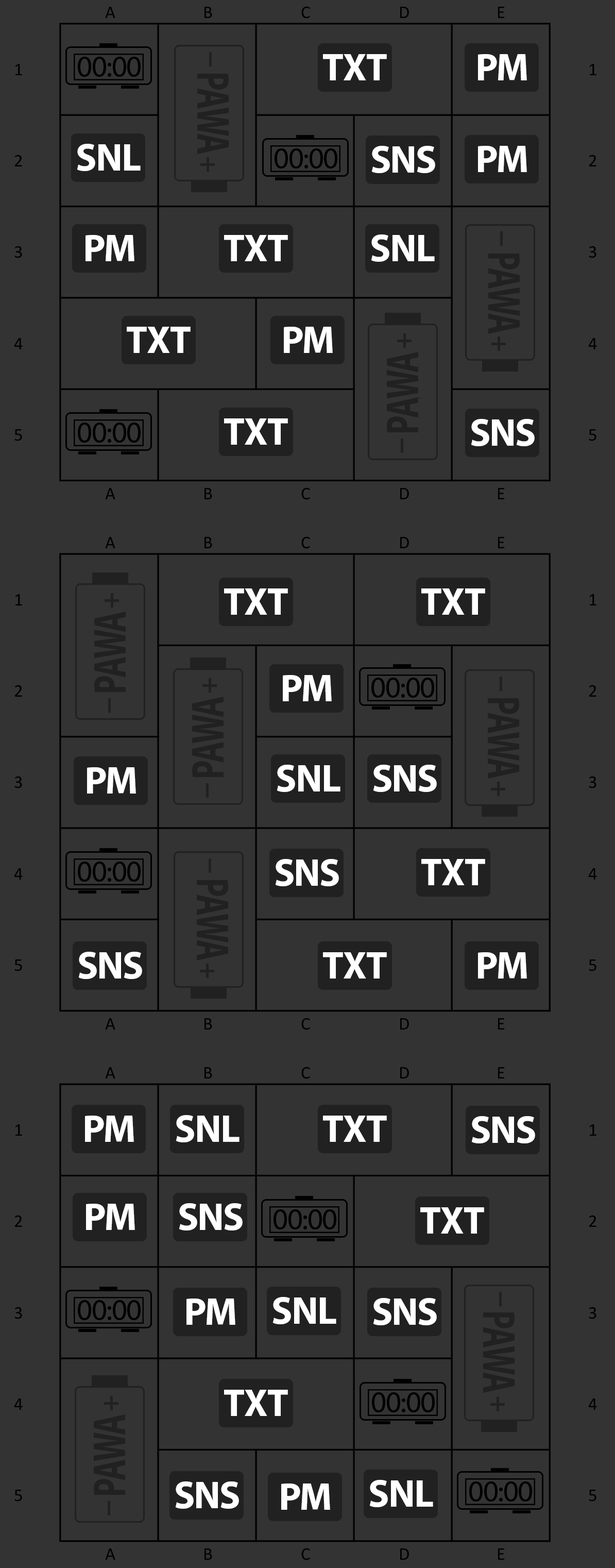
<style>
.page{position:relative;width:615px;height:1568px;background:#333333}
.page>*{position:absolute;margin:0}
.t1{font:30px "MyriadPro-Regular";letter-spacing:-0.025em;color:#000000}
.t2{font:38.6px "MyriadPro-Bold";letter-spacing:-0.025em;color:#ffffff}
.t3{font:46.5px "MyriadPro-Bold";letter-spacing:-0.025em;color:#212121;scale:0.71 1}
.t4{font:46.3px "MyriadPro-Bold";letter-spacing:-0.025em;color:#212121;scale:0.71 1}
</style>
<div class="page">
<p class="t1" style="left:78px;top:57px;width:63px;height:20px">00:00</p>
<p class="t2" style="left:323px;top:54px;width:64px;height:26px">TXT</p>
<p class="t2" style="left:478px;top:54px;width:49px;height:26px">PM</p>
<p class="t3" style="left:197px;top:74px;width:32px;height:80px;rotate:90deg">PAWA</p>
<p class="t2" style="left:77px;top:144px;width:64px;height:27px">SNL</p>
<p class="t1" style="left:275px;top:148px;width:63px;height:20px">00:00</p>
<p class="t2" style="left:372px;top:146px;width:63px;height:27px">SNS</p>
<p class="t2" style="left:478px;top:146px;width:49px;height:26px">PM</p>
<p class="t2" style="left:86px;top:235px;width:48px;height:26px">PM</p>
<p class="t2" style="left:224px;top:235px;width:64px;height:26px">TXT</p>
<p class="t2" style="left:371px;top:234px;width:64px;height:28px">SNL</p>
<p class="t3" style="left:488px;top:254px;width:32px;height:80px;rotate:90deg">PAWA</p>
<p class="t2" style="left:127px;top:327px;width:64px;height:26px">TXT</p>
<p class="t2" style="left:284px;top:327px;width:49px;height:26px">PM</p>
<p class="t4" style="left:387px;top:352px;width:31px;height:80px;rotate:-90deg">PAWA</p>
<p class="t1" style="left:78px;top:423px;width:63px;height:20px">00:00</p>
<p class="t2" style="left:224px;top:418px;width:64px;height:27px">TXT</p>
<p class="t2" style="left:471px;top:419px;width:64px;height:27px">SNS</p>
<p class="t2" style="left:224px;top:588px;width:64px;height:27px">TXT</p>
<p class="t2" style="left:421px;top:588px;width:64px;height:27px">TXT</p>
<p class="t4" style="left:94px;top:612px;width:32px;height:80px;rotate:-90deg">PAWA</p>
<p class="t2" style="left:283px;top:675px;width:49px;height:26px">PM</p>
<p class="t1" style="left:372px;top:678px;width:62px;height:20px">00:00</p>
<p class="t4" style="left:192px;top:697px;width:32px;height:80px;rotate:-90deg">PAWA</p>
<p class="t3" style="left:488px;top:698px;width:31px;height:81px;rotate:90deg">PAWA</p>
<p class="t2" style="left:87px;top:767px;width:49px;height:27px">PM</p>
<p class="t2" style="left:277px;top:765px;width:64px;height:27px">SNL</p>
<p class="t2" style="left:373px;top:765px;width:64px;height:27px">SNS</p>
<p class="t1" style="left:78px;top:862px;width:63px;height:20px">00:00</p>
<p class="t2" style="left:275px;top:859px;width:64px;height:27px">SNS</p>
<p class="t2" style="left:421px;top:859px;width:64px;height:26px">TXT</p>
<p class="t3" style="left:197px;top:880px;width:31px;height:80px;rotate:90deg">PAWA</p>
<p class="t2" style="left:78px;top:952px;width:64px;height:27px">SNS</p>
<p class="t2" style="left:323px;top:952px;width:64px;height:27px">TXT</p>
<p class="t2" style="left:478px;top:952px;width:49px;height:27px">PM</p>
<p class="t2" style="left:85px;top:1116px;width:49px;height:26px">PM</p>
<p class="t2" style="left:176px;top:1115px;width:64px;height:27px">SNL</p>
<p class="t2" style="left:323px;top:1116px;width:64px;height:26px">TXT</p>
<p class="t2" style="left:471px;top:1116px;width:64px;height:27px">SNS</p>
<p class="t2" style="left:86px;top:1204px;width:49px;height:26px">PM</p>
<p class="t2" style="left:179px;top:1203px;width:64px;height:27px">SNS</p>
<p class="t1" style="left:274px;top:1209px;width:62px;height:20px">00:00</p>
<p class="t2" style="left:420px;top:1207px;width:64px;height:27px">TXT</p>
<p class="t1" style="left:78px;top:1300px;width:63px;height:20px">00:00</p>
<p class="t2" style="left:187px;top:1299px;width:48px;height:26px">PM</p>
<p class="t2" style="left:273px;top:1297px;width:63px;height:27px">SNL</p>
<p class="t2" style="left:373px;top:1298px;width:64px;height:27px">SNS</p>
<p class="t4" style="left:483px;top:1312px;width:32px;height:81px;rotate:90deg">PAWA</p>
<p class="t2" style="left:224px;top:1390px;width:64px;height:26px">TXT</p>
<p class="t1" style="left:372px;top:1392px;width:63px;height:20px">00:00</p>
<p class="t4" style="left:94px;top:1414px;width:31px;height:81px;rotate:-90deg">PAWA</p>
<p class="t2" style="left:175px;top:1481px;width:64px;height:28px">SNS</p>
<p class="t2" style="left:369px;top:1480px;width:64px;height:27px">SNL</p>
<p class="t1" style="left:469px;top:1481px;width:63px;height:21px">00:00</p>
<p class="t2" style="left:281px;top:1483px;width:49px;height:27px">PM</p>
</div>
